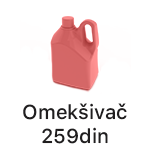
<style>
.page{position:relative;width:150px;height:150px;background:#ffffff}
.page>*{position:absolute;margin:0}
.t1{font:20px/24px "SFProText-Medium";color:#201e1f}
</style>
<div class="page">
<p class="t1" style="left:23px;top:103px;width:104px;height:41px;text-align:center">Omekšivač<br>259din</p>
</div>
